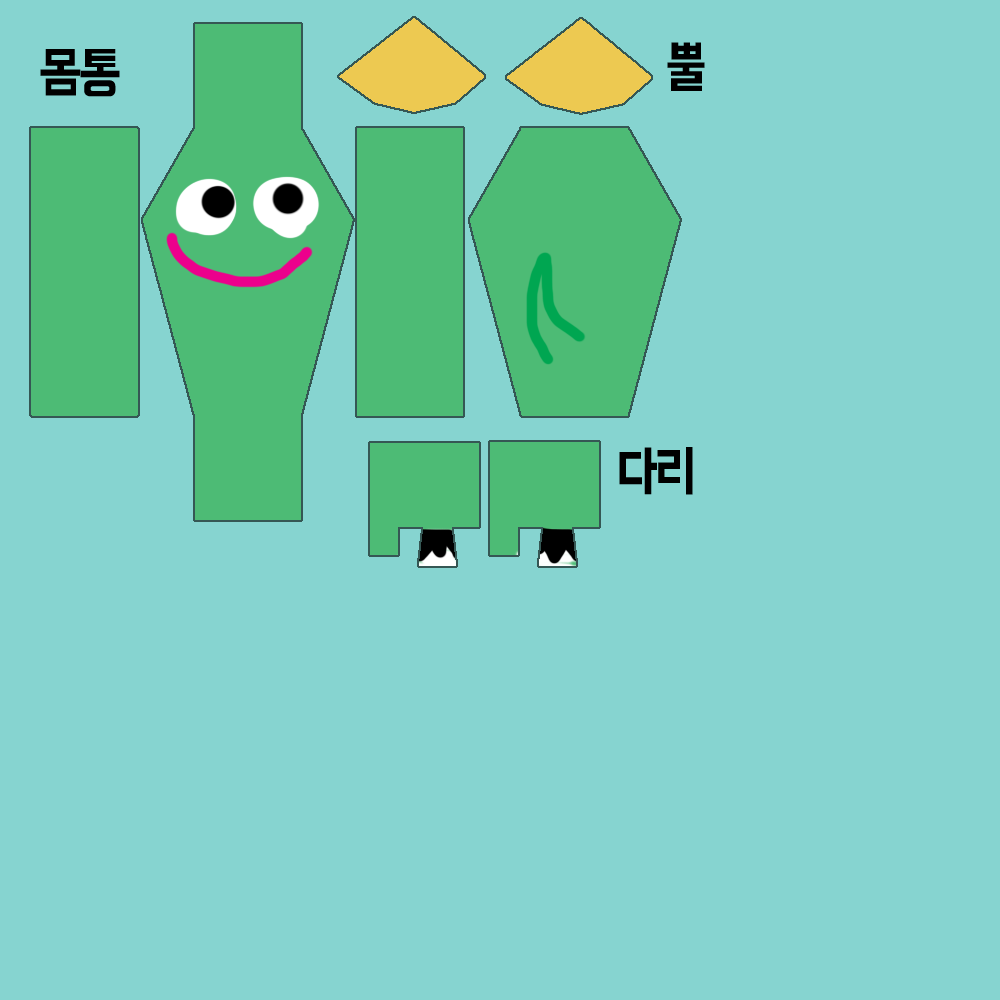
<style>
.page{position:relative;width:1000px;height:1000px;background:#86d4d0}
.page>*{position:absolute;margin:0}
.t1{font:56.2px "BM-HANNAStd";letter-spacing:-0.05em;color:#000000;scale:0.9 1}
</style>
<div class="page">
<p class="t1" style="left:40px;top:49px;width:80px;height:48px">몸통</p>
<p class="t1" style="left:667px;top:42px;width:38px;height:50px">뿔</p>
<p class="t1" style="left:619px;top:447px;width:74px;height:48px">다리</p>
</div>
